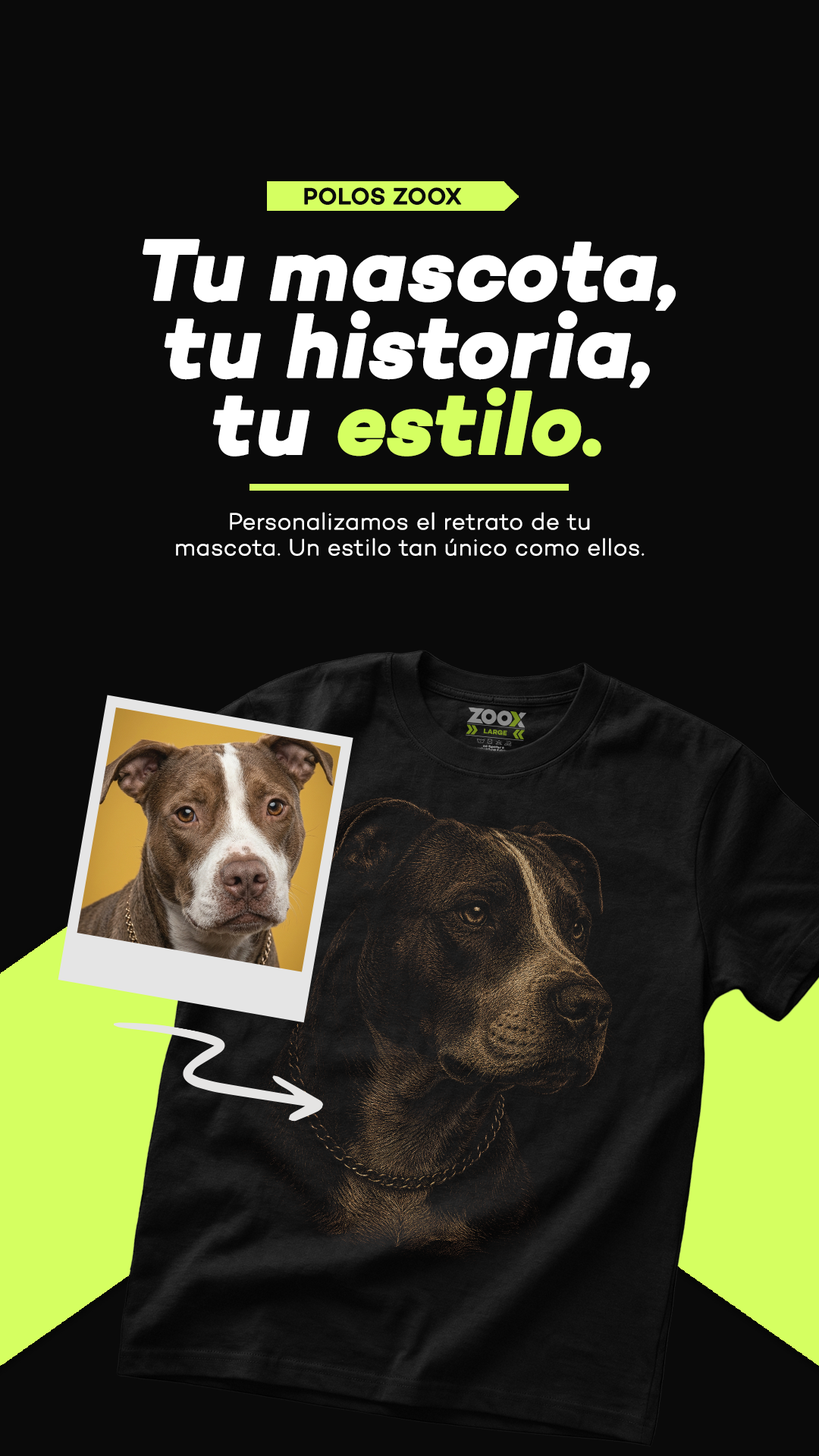
<style>
.page{position:relative;width:819px;height:1456px;background:#0a0a0a}
.page>*{position:absolute;margin:0}
.t1{font:23.2px "Campton-Medium";color:#0a0a0a;font-weight:bold}
.t2{font:87.2px/77px "Campton-BoldItalic";color:#ffffff;font-weight:bold}
.t3{font:87.2px/77px "Campton-BoldItalic";color:#d5ff61;font-weight:bold}
.t4{font:23.2px/25.9px "Campton-Light";color:#ffffff;font-weight:bold}
</style>
<div class="page">
<p class="t1" style="left:304px;top:187px;width:158px;height:18px">POLOS ZOOX</p>
<p class="t2" style="left:143px;top:239px;width:533px;height:218px;text-align:center">Tu mascota,<br>tu historia,<br>tu <span class="t3">estilo.</span></p>
<p class="t4" style="left:176px;top:512px;width:469px;height:44px;text-align:center">Personalizamos el retrato de tu<br>mascota. Un estilo tan único como ellos.</p>
</div>
